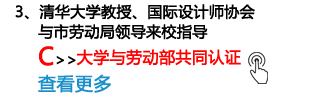
<style>
.page{position:relative;width:320px;height:100px;background:#ffffff}
.page>*{position:absolute;margin:0}
.t1{font:15px "MicrosoftYaHei";color:#000000;text-transform:uppercase;font-weight:bold}
.t2{font:24px "MicrosoftYaHei";color:#fe0202;text-transform:uppercase;font-weight:bold}
.t3{font:16px "MicrosoftYaHei";color:#fe0202;text-transform:uppercase;font-weight:bold}
.t4{font:18px "MicrosoftYaHei";color:#1b8fca;text-transform:uppercase;font-weight:bold}
</style>
<div class="page">
<p class="t1" style="left:15px;top:4px;width:240px;height:16px">3、清华大学教授、国际设计师协会</p>
<p class="t1" style="left:38px;top:24px;width:170px;height:16px">与市劳动局领导来校指导</p>
<p class="t1" style="left:39px;top:46px;width:37px;height:20px"><span class="t2">C</span>&gt;&gt;</p>
<p class="t3" style="left:76px;top:49px;width:165px;height:17px">大学与劳动部共同认证</p>
<p class="t4" style="left:38px;top:74px;width:73px;height:19px">查看更多</p>
</div>
